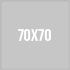
<style>
.page{position:relative;width:70px;height:70px;background:#c6c6c6}
.page>*{position:absolute;margin:0}
.t1{font:16.8px "BebasNeue";color:#ffffff}
</style>
<div class="page">
<p class="t1" style="left:18px;top:29px;width:33px;height:12px">70x70</p>
</div>
